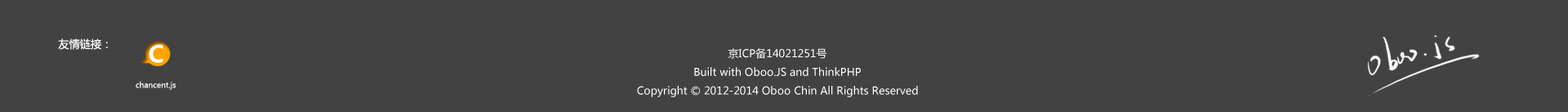
<style>
.page{position:relative;width:1568px;height:112px;background:#424242}
.page>*{position:absolute;margin:0}
.t1{font:10.8px "MicrosoftYaHei";color:#ffffff}
.t2{font:10.7px "MicrosoftYaHei";color:#ffffff}
.t3{font:7.6px "MicrosoftYaHei";color:#ffffff}
</style>
<div class="page">
<p class="t1" style="left:58px;top:38px;width:50px;height:12px">友情链接：</p>
<p class="t2" style="left:637px;top:48px;width:281px;height:49px;text-align:center">京ICP备14021251号<br>Built with Oboo.JS and ThinkPHP<br>Copyright © 2012-2014 Oboo Chin All Rights Reserved</p>
<p class="t3" style="left:136px;top:81px;width:40px;height:9px">chancent.js</p>
</div>
